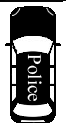
<style>
.page{position:relative;width:66px;height:129px;background:#ffffff}
.page>*{position:absolute;margin:0}
.t1{font:19.3px "TimesNewRomanPSMT"}
</style>
<div class="page">
<p class="t1" style="left:27px;top:53px;width:15px;height:47px;rotate:90deg">Police</p>
</div>
